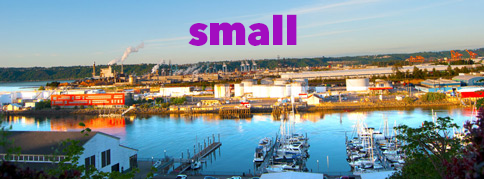
<style>
.page{position:relative;width:484px;height:179px}
.page>*{position:absolute;margin:0}
.t1{font:40px "AvenirNextLTPro-Heavy";color:#a20dc0}
</style>
<div class="page">
<p class="t1" style="left:188px;top:14px;width:109px;height:32px">small</p>
</div>
